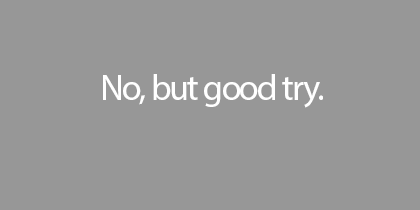
<style>
.page{position:relative;width:420px;height:210px;background:#979797}
.page>*{position:absolute;margin:0}
.t1{font:36px "MyriadPro-Regular";letter-spacing:-0.05em;color:#ffffff}
</style>
<div class="page">
<p class="t1" style="left:103px;top:74px;width:220px;height:34px">No, but good try.</p>
</div>
